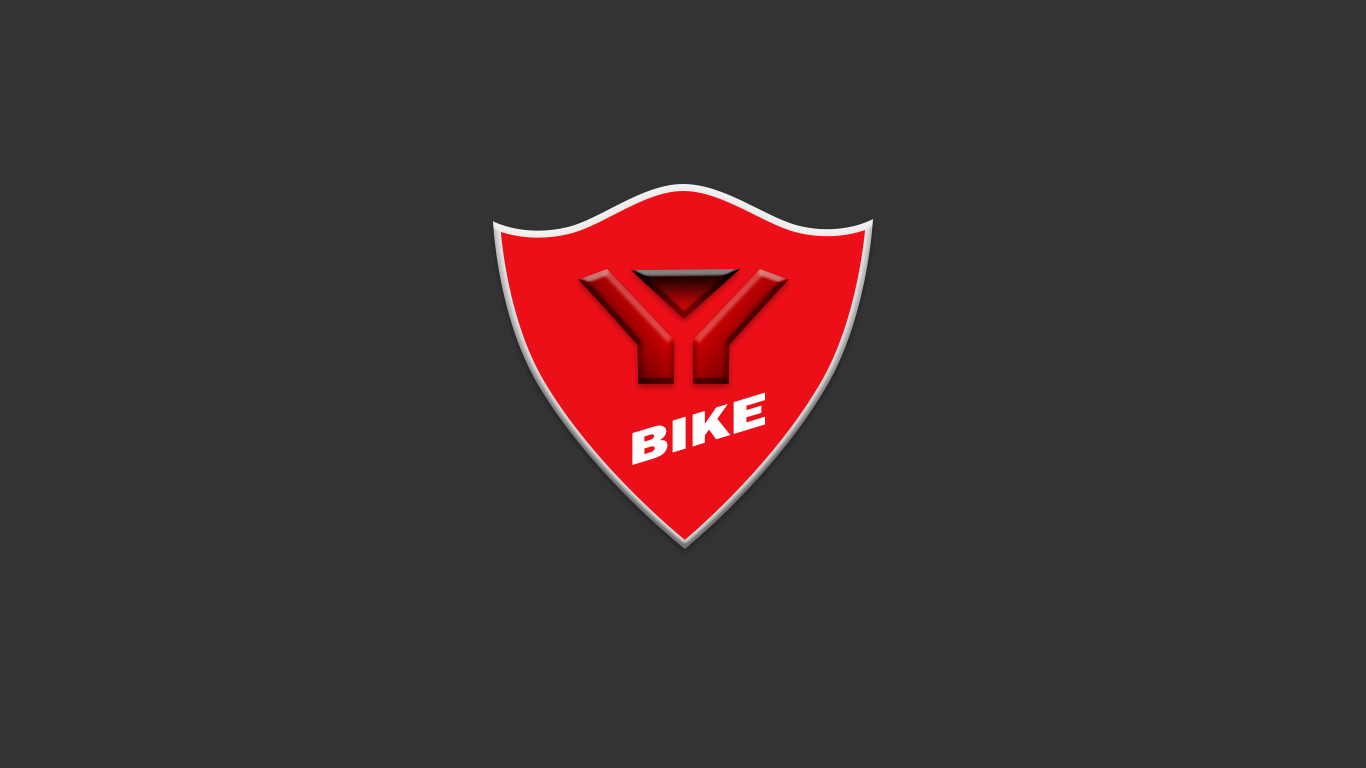
<style>
.page{position:relative;width:1366px;height:768px;background:#333333}
.page>*{position:absolute;margin:0}
.t1{font:47.5px "FranklinGothic-Heavy";color:#ffffff;scale:1.38 1}
</style>
<div class="page">
<p class="t1" style="left:632px;top:392px;width:133px;height:73px;rotate:-17deg">BIKE</p>
</div>
